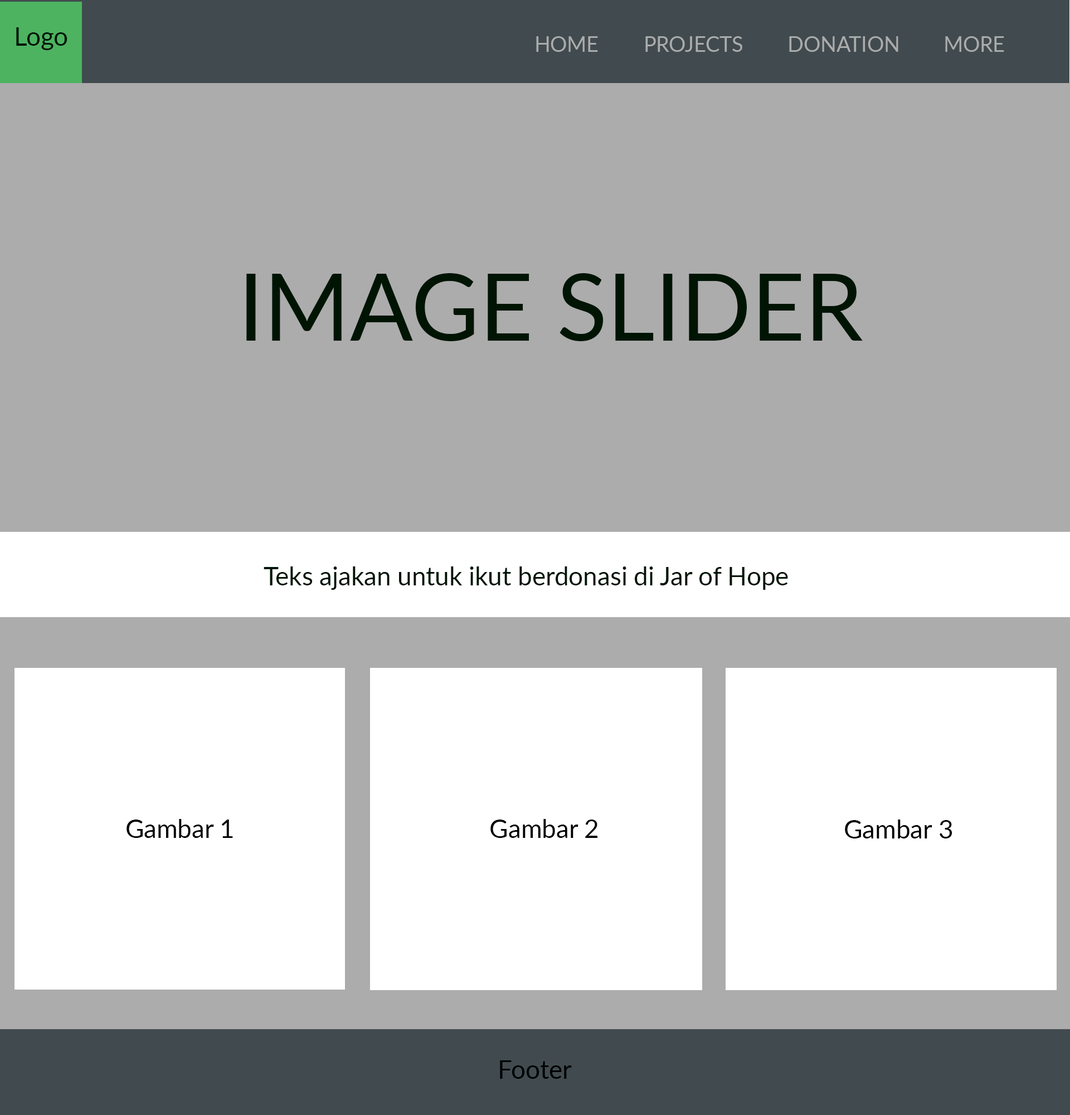
<style>
.page{position:relative;width:1070px;height:1115px;background:#acacac}
.page>*{position:absolute;margin:0}
.t1{font:25.5px "Lato-Regular";color:#001404}
.t2{font:92.9px "Lato-Regular";color:#001404}
.t3{font:25.5px "Lato-Regular";color:#000000}
</style>
<div class="page">
<p class="t1" style="left:16px;top:27px;width:51px;height:23px">Logo</p>
<p class="t2" style="left:246px;top:273px;width:617px;height:68px">IMAGE SLIDER</p>
<p class="t1" style="left:264px;top:566px;width:524px;height:24px">Teks ajakan untuk ikut berdonasi di Jar of Hope</p>
<p class="t3" style="left:126px;top:819px;width:107px;height:19px">Gambar 1</p>
<p class="t3" style="left:490px;top:819px;width:108px;height:19px">Gambar 2</p>
<p class="t3" style="left:845px;top:819px;width:107px;height:19px">Gambar 3</p>
<p class="t3" style="left:500px;top:1060px;width:72px;height:18px">Footer</p>
</div>
